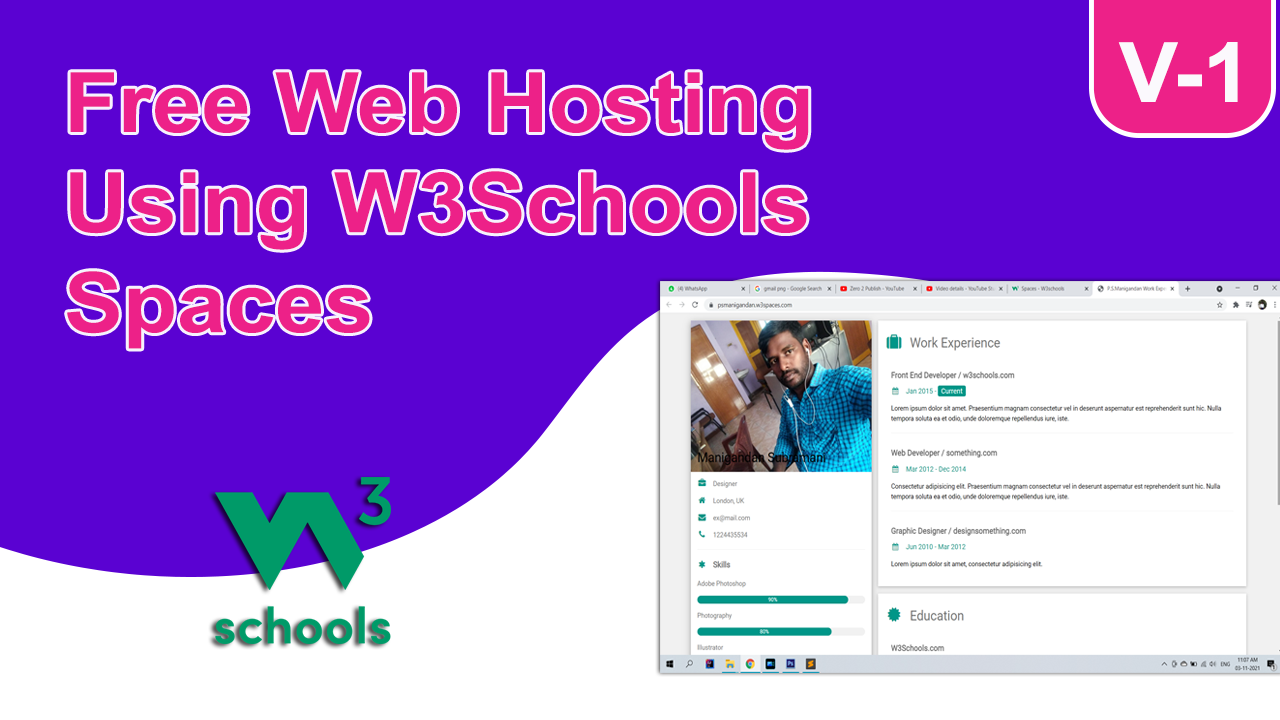
<style>
.page{position:relative;width:1280px;height:720px;background:#5a02d2}
.page>*{position:absolute;margin:0}
.t1{font:83.3px "Arial-BoldMT";color:#fbf9fd;scale:1.06 1}
.t2{font:83.3px "Arial-BoldMT";color:#ed2188;scale:1.06 1}
</style>
<div class="page">
<p class="t1" style="left:1118px;top:42px;width:120px;height:60px">V-1</p>
<p class="t2" style="left:67px;top:72px;width:742px;height:277px">Free Web Hosting<br>Using W3Schools<br>Spaces</p>
</div>
